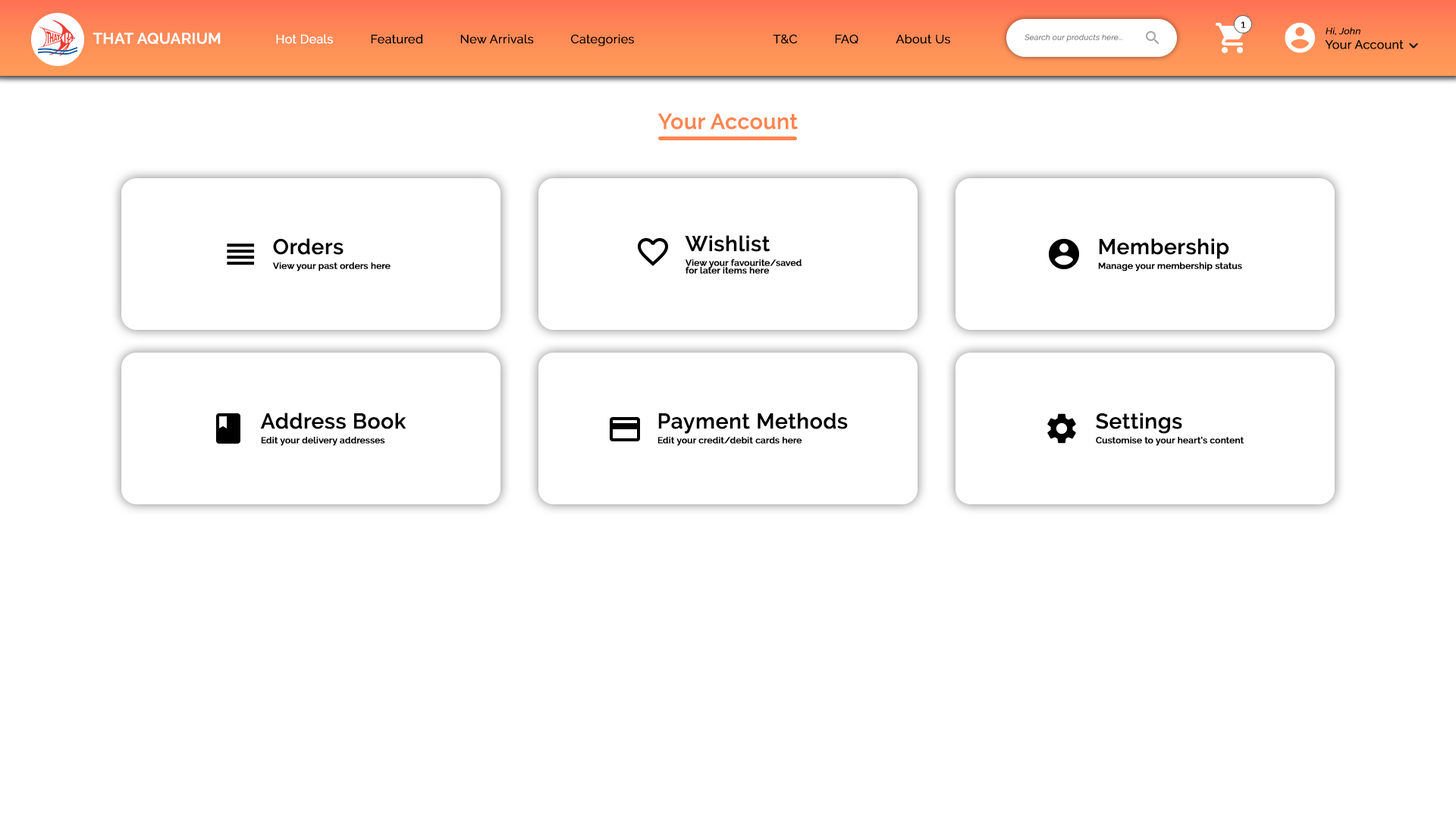
<style>
.page{position:relative;width:1456px;height:819px;background:#ffffff}
.page>*{position:absolute;margin:0}
.t1{font:10.6px "Raleway-Regular";color:#000000;font-weight:bold}
.t2{font:12.1px "Raleway-Regular";color:#000000;font-weight:bold}
.t3{font:9.1px "Raleway-Regular";color:#000000;font-weight:bold;font-style:italic}
.t4{font:15.2px "Raleway-SemiBold";color:#ffffff;font-weight:bold}
.t5{font:12.1px "Raleway-Regular";color:#ffffff;font-weight:bold}
.t6{font:7.6px "Raleway-Regular";color:#787878;font-weight:bold;font-style:italic}
.t7{font:36.4px "Raleway-SemiBold";color:#ff854f;font-weight:bold}
.t8{font:15.2px/7.6px "Raleway-SemiBold";color:#000000;font-weight:bold}
.t9{font:36.4px/7.6px "Raleway-SemiBold";color:#000000;font-weight:bold}
</style>
<div class="page">
<p class="t1" style="left:1241px;top:21px;width:5px;height:7px">1</p>
<p class="t2" style="left:1325px;top:27px;width:79px;height:22px"><span class="t3">Hi, John<br></span>Your Account</p>
<p class="t4" style="left:93px;top:33px;width:128px;height:11px">THAT AQUARIUM</p>
<p class="t5" style="left:276px;top:34px;width:57px;height:10px">Hot Deals</p>
<p class="t2" style="left:371px;top:34px;width:52px;height:10px">Featured</p>
<p class="t2" style="left:460px;top:34px;width:74px;height:10px">New Arrivals</p>
<p class="t2" style="left:571px;top:34px;width:63px;height:12px">Categories</p>
<p class="t2" style="left:773px;top:34px;width:25px;height:10px">T&amp;C</p>
<p class="t2" style="left:835px;top:34px;width:23px;height:10px">FAQ</p>
<p class="t2" style="left:896px;top:34px;width:54px;height:10px">About Us</p>
<p class="t6" style="left:1024px;top:34px;width:99px;height:8px">Search our products here...</p>
<p class="t7" style="left:657px;top:113px;width:141px;height:17px">Your Account</p>
<p class="t8" style="left:272px;top:238px;width:119px;height:33px"><span class="t9">Orders<br></span>View your past orders here</p>
<p class="t8" style="left:685px;top:235px;width:117px;height:39px"><span class="t9">Wishlist<br></span>View your favourite/saved <br>for later items here</p>
<p class="t8" style="left:1098px;top:238px;width:144px;height:33px"><span class="t9">Membership<br></span>Manage your membership status</p>
<p class="t8" style="left:260px;top:413px;width:146px;height:33px"><span class="t9">Address Book<br></span>Edit your delivery addresses</p>
<p class="t8" style="left:657px;top:413px;width:191px;height:33px"><span class="t9">Payment Methods<br></span>Edit your credit/debit cards here</p>
<p class="t8" style="left:1096px;top:413px;width:148px;height:33px"><span class="t9">Settings<br></span>Customise to your heart’s content</p>
</div>
